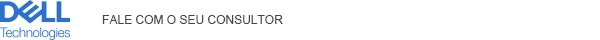
<style>
.page{position:relative;width:600px;height:40px;background:#ffffff}
.page>*{position:absolute;margin:0}
.t1{font:12px "ArialMT";color:#444444;text-transform:uppercase}
</style>
<div class="page">
<p class="t1" style="left:102px;top:15px;width:181px;height:9px">FALE COM O SEU CONSULTOR</p>
</div>
